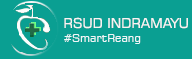
<style>
.page{position:relative;width:192px;height:59px;background:#0a9f92}
.page>*{position:absolute;margin:0}
.t1{font:13.5px "Square721BT-Roman";color:#f9f3f3}
.t2{font:11.3px "Square721BT-Roman";color:#eef7f9}
</style>
<div class="page">
<p class="t1" style="left:64px;top:17px;width:124px;height:12px">RSUD INDRAMAYU</p>
<p class="t2" style="left:64px;top:34px;width:77px;height:10px">#SmartReang</p>
</div>
